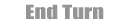
<style>
.page{position:relative;width:128px;height:24px;background:#ffffff}
.page>*{position:absolute;margin:0}
.t1{font:18px "Impact";color:#959494;scale:1.25 1}
</style>
<div class="page">
<p class="t1" style="left:26px;top:4px;width:78px;height:16px">End Turn</p>
</div>
